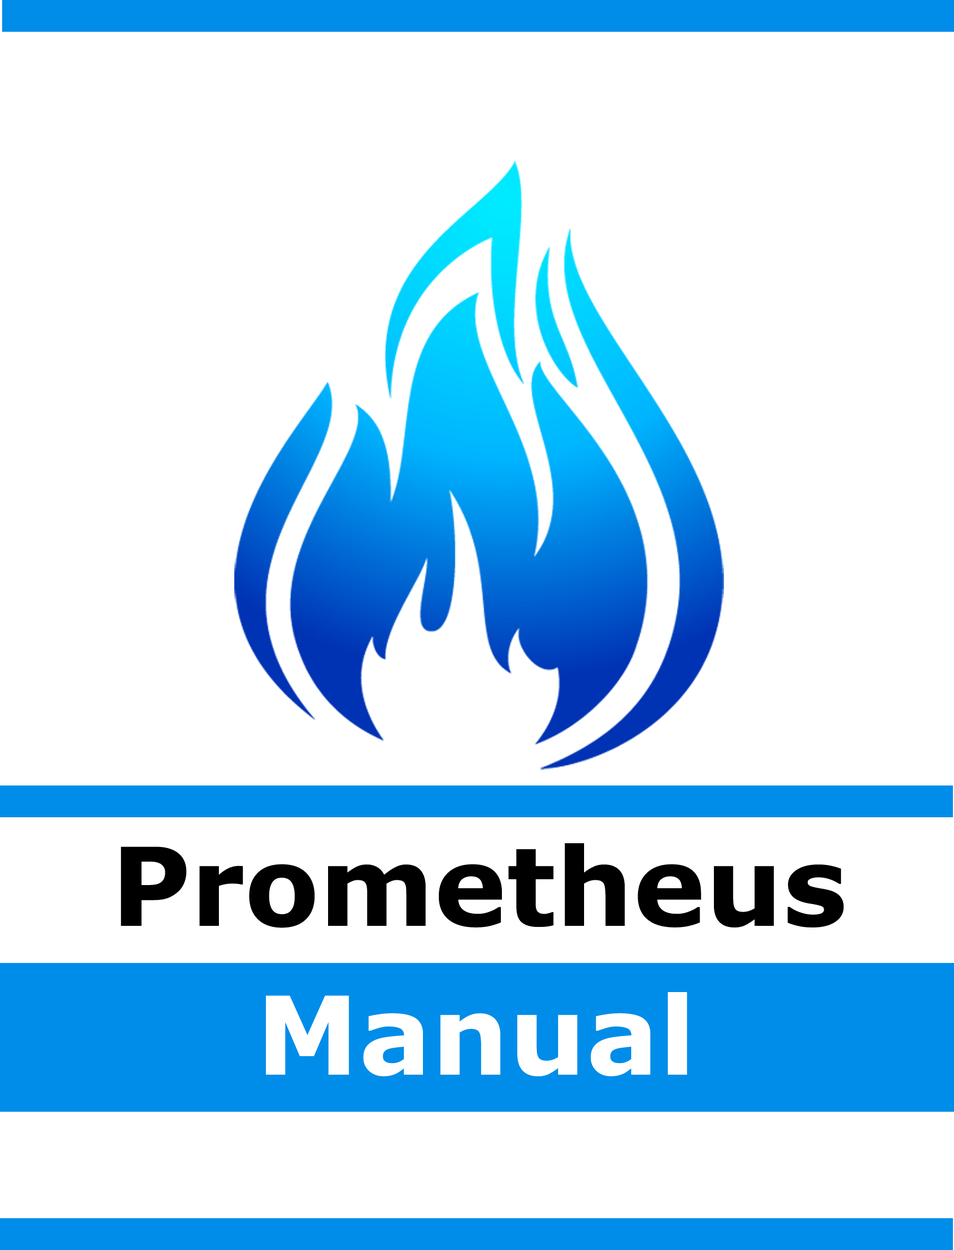
<style>
.page{position:relative;width:954px;height:1250px;background:#ffffff}
.page>*{position:absolute;margin:0}
.t1{font:108.6px "Verdana-Bold";color:#000000}
.t2{font:108.6px "Verdana-Bold";color:#ffffff}
</style>
<div class="page">
<p class="t1" style="left:121px;top:843px;width:722px;height:85px">Prometheus</p>
<p class="t2" style="left:265px;top:992px;width:422px;height:85px">Manual</p>
</div>
